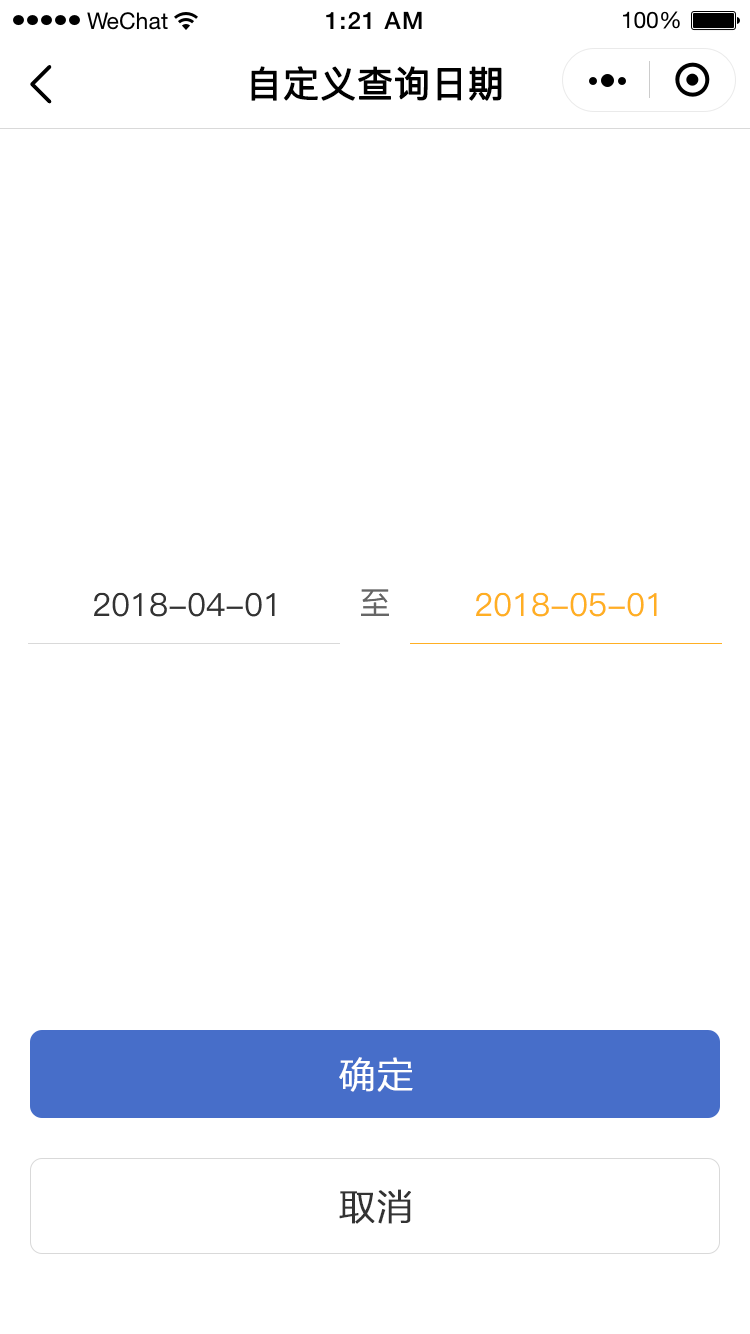
<style>
.page{position:relative;width:750px;height:1334px;background:#ffffff}
.page>*{position:absolute;margin:0}
.t1{font:36px "PingFang-SC-Medium";color:#000000;font-weight:bold}
.t2{font:32px "PingFang-SC-Medium";color:#333333}
.t3{font:32px "PingFang-SC-Medium";color:#666666}
.t4{font:32px "PingFang-SC-Medium";color:#ffaf23}
.t5{font:36px "STHeitiSC-Medium";color:#ffffff;font-weight:bold}
.t6{font:36px "STHeitiSC-Medium";color:#333333;font-weight:bold}
</style>
<div class="page">
<p class="t1" style="left:251px;top:66px;width:251px;height:35px">自定义查询日期</p>
<p class="t2" style="left:94px;top:592px;width:181px;height:25px">2018-04-01</p>
<p class="t3" style="left:361px;top:589px;width:28px;height:27px">至</p>
<p class="t4" style="left:476px;top:592px;width:181px;height:25px">2018-05-01</p>
<p class="t5" style="left:339px;top:1057px;width:74px;height:35px">确定</p>
<p class="t6" style="left:339px;top:1189px;width:72px;height:35px">取消</p>
</div>
